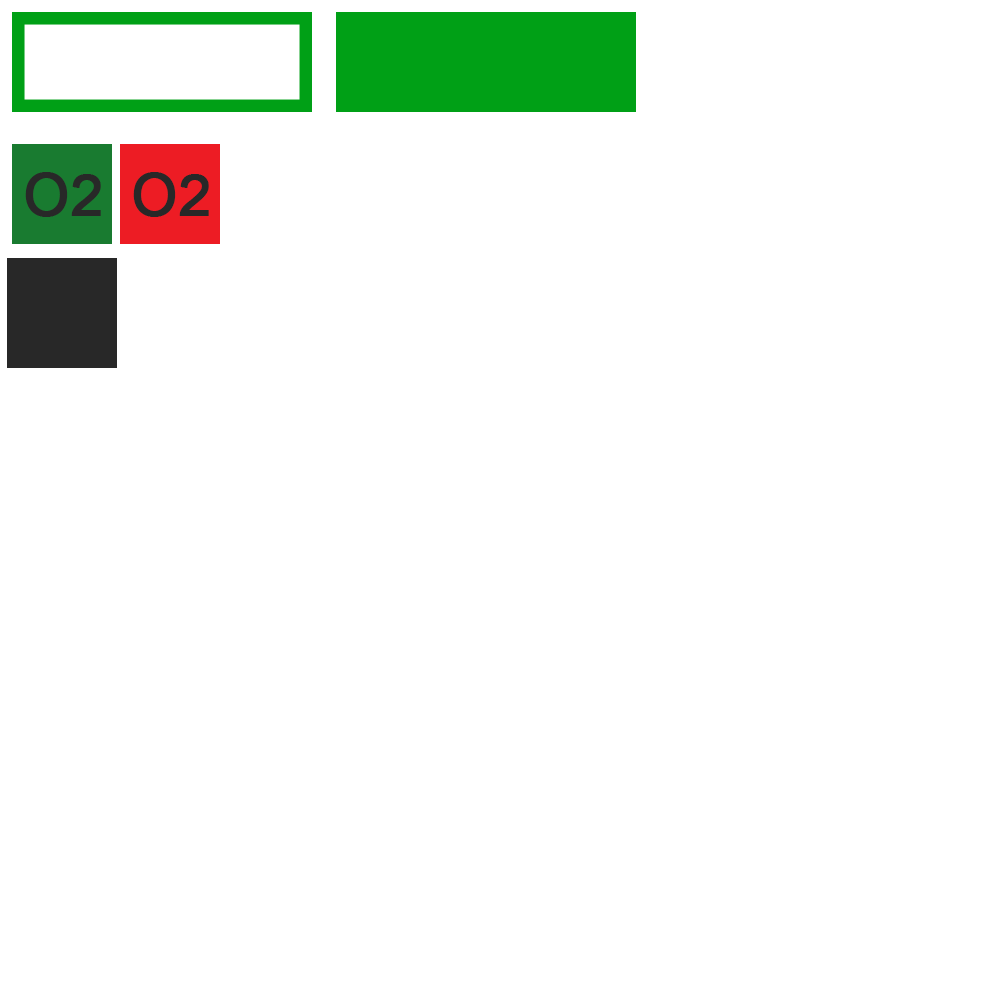
<style>
.page{position:relative;width:1000px;height:1000px;background:#ffffff}
.page>*{position:absolute;margin:0}
.t1{font:58.3px "ArialMT";color:#282828;font-weight:bold}
</style>
<div class="page">
<p class="t1" style="left:25px;top:172px;width:76px;height:45px">O2</p>
<p class="t1" style="left:133px;top:172px;width:76px;height:45px">O2</p>
</div>
